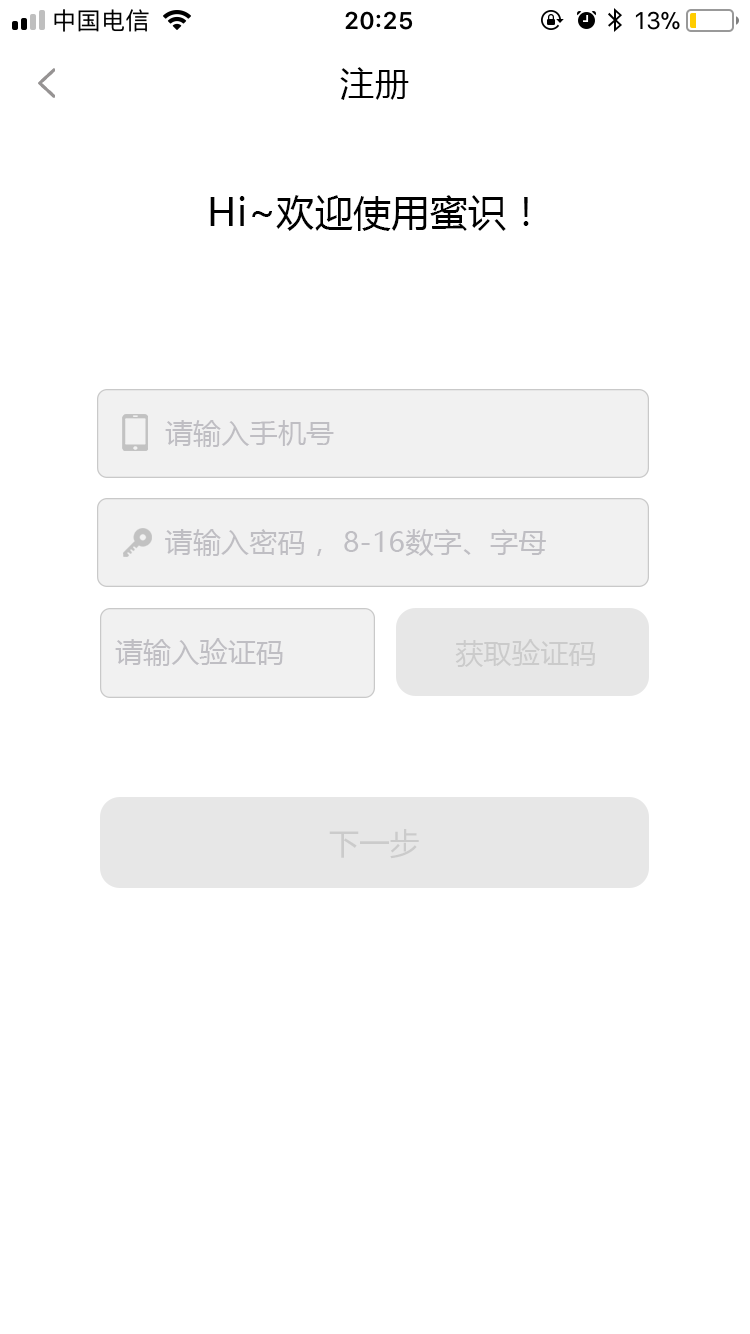
<style>
.page{position:relative;width:750px;height:1334px;background:#ffffff}
.page>*{position:absolute;margin:0}
.t1{font:34px "MicrosoftYaHei";letter-spacing:0.01em;color:#000000}
.t2{font:38px "MicrosoftYaHei";letter-spacing:0.01em;color:#000000}
.t3{font:28px "MicrosoftYaHei";letter-spacing:0.01em;color:#bfbec3}
.t4{font:28px "MicrosoftYaHei";letter-spacing:0.01em;color:#cbcbcb}
.t5{font:30px "MicrosoftYaHei";letter-spacing:0.01em;color:#cbcbcb}
</style>
<div class="page">
<p class="t1" style="left:340px;top:67px;width:69px;height:33px">注册</p>
<p class="t2" style="left:210px;top:195px;width:319px;height:36px">Hi~欢迎使用蜜识！</p>
<p class="t3" style="left:165px;top:420px;width:169px;height:27px">请输入手机号</p>
<p class="t3" style="left:165px;top:529px;width:381px;height:27px">请输入密码， 8-16数字、字母</p>
<p class="t3" style="left:115px;top:638px;width:168px;height:28px">请输入验证码</p>
<p class="t4" style="left:455px;top:639px;width:140px;height:28px">获取验证码</p>
<p class="t5" style="left:329px;top:829px;width:90px;height:30px">下一步</p>
</div>
